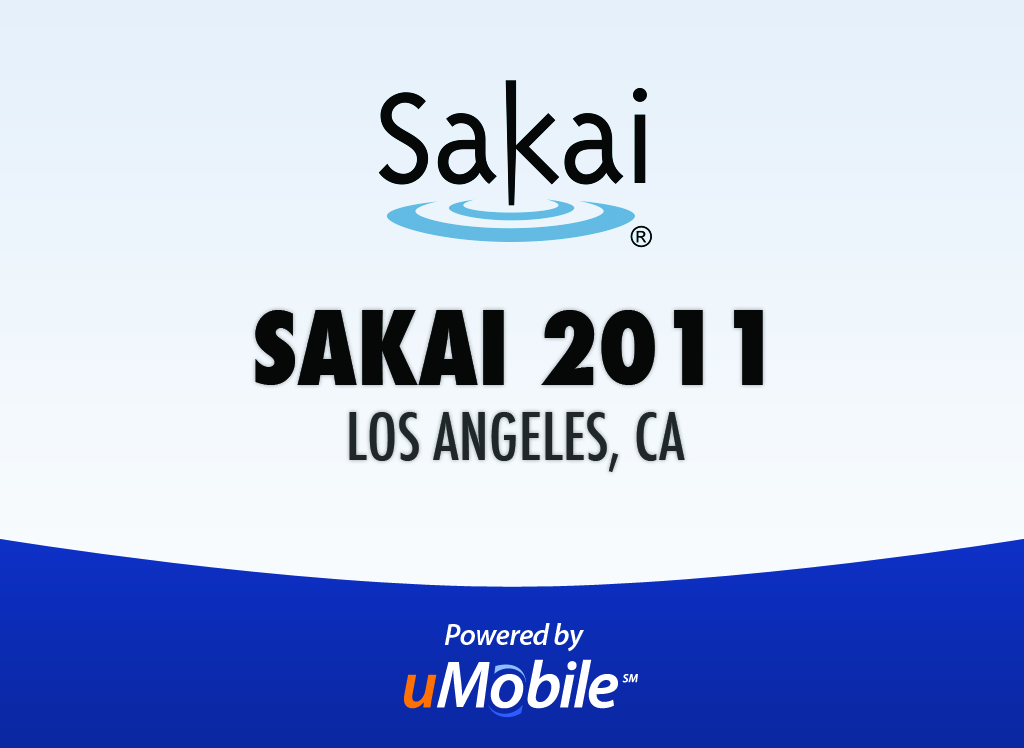
<style>
.page{position:relative;width:1024px;height:748px}
.page>*{position:absolute;margin:0}
.t1{font:62.8px "Futura-CondensedMedium";color:#202728;text-transform:uppercase}
.t2{font:100px "Futura-CondensedExtraBold";color:#060808;text-transform:uppercase}
.t3{font:30px "MyriadPro-SemiboldIt";letter-spacing:-0.025em;color:#ffffff}
</style>
<div class="page">
<p class="t1" style="left:255px;top:310px;width:508px;height:162px;text-align:center"><span class="t2">Sakai 2011<br></span>Los angeles, ca</p>
<p class="t3" style="left:444px;top:623px;width:140px;height:29px">Powered by</p>
</div>
